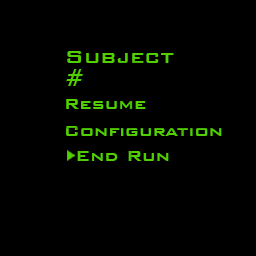
<style>
.page{position:relative;width:256px;height:256px;background:#000000}
.page>*{position:absolute;margin:0}
.t1{font:24px "BankGothicBT-Medium";color:#51cf00}
.t2{font:20px "BankGothicBT-Medium";color:#51cf00}
</style>
<div class="page">
<p class="t1" style="left:67px;top:51px;width:107px;height:12px">Subject</p>
<p class="t1" style="left:66px;top:69px;width:17px;height:17px">#</p>
<p class="t2" style="left:66px;top:99px;width:80px;height:10px">Resume</p>
<p class="t2" style="left:66px;top:126px;width:156px;height:10px">Configuration</p>
<p class="t2" style="left:77px;top:151px;width:92px;height:10px">End Run</p>
</div>
